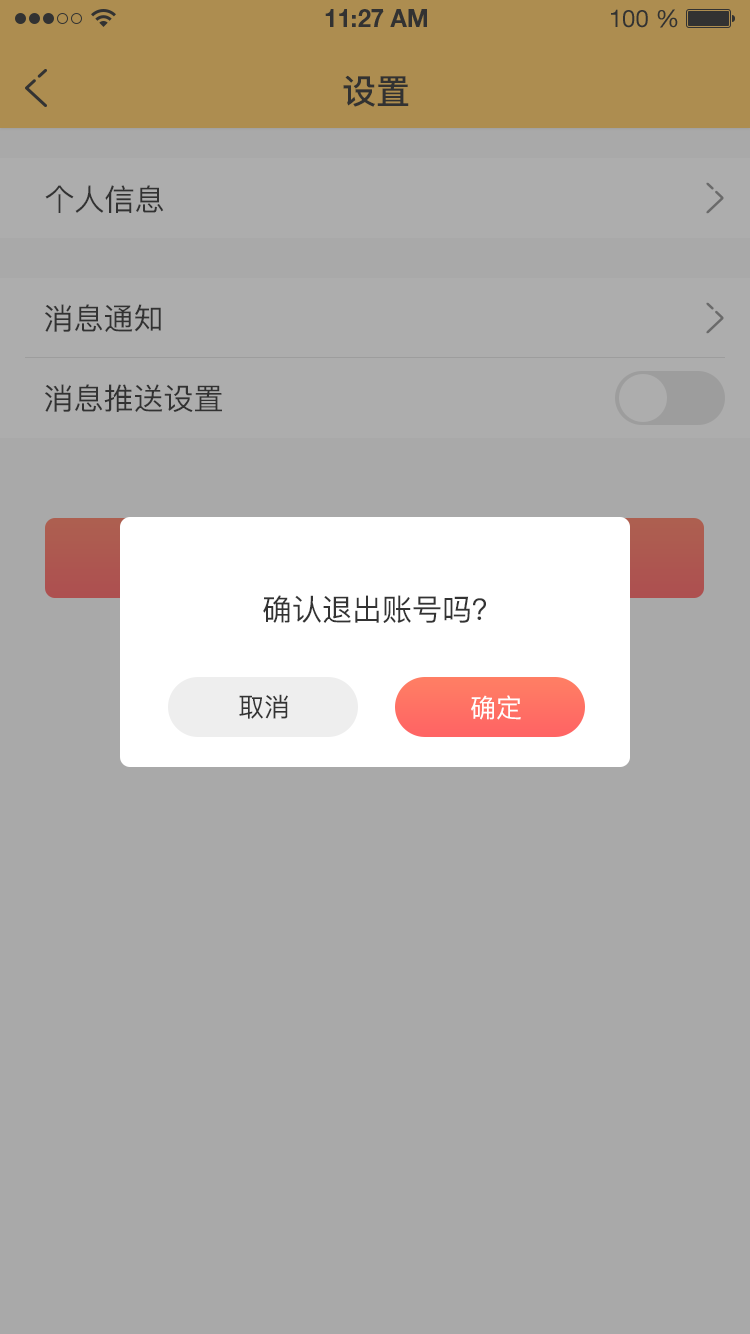
<style>
.page{position:relative;width:750px;height:1334px;background:#a9a9a9}
.page>*{position:absolute;margin:0}
.t1{font:34px "PingFang-SC-Bold";color:#333333;text-transform:uppercase}
.t2{font:30px "PingFang-SC-Medium";color:#333333;text-transform:uppercase}
.t3{font:26px "PingFang-SC-Medium";color:#333333;text-transform:uppercase}
.t4{font:26px "PingFang-SC-Medium";color:#fffefe;text-transform:uppercase}
</style>
<div class="page">
<p class="t1" style="left:343px;top:75px;width:66px;height:32px">设置</p>
<p class="t2" style="left:45px;top:185px;width:119px;height:28px">个人信息</p>
<p class="t2" style="left:45px;top:304px;width:116px;height:28px">消息通知</p>
<p class="t2" style="left:45px;top:384px;width:177px;height:28px">消息推送设置</p>
<p class="t2" style="left:263px;top:595px;width:223px;height:28px">确认退出账号吗？</p>
<p class="t3" style="left:239px;top:694px;width:49px;height:25px">取消</p>
<p class="t4" style="left:471px;top:695px;width:50px;height:25px">确定</p>
</div>
